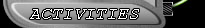
<style>
.page{position:relative;width:205px;height:28px;background:#000000}
.page>*{position:absolute;margin:0}
.t1{font:18px "CourierNewPS-ItalicMT";color:#ffffff}
</style>
<div class="page">
<p class="t1" style="left:30px;top:9px;width:109px;height:10px">ACTIVITIES</p>
</div>
